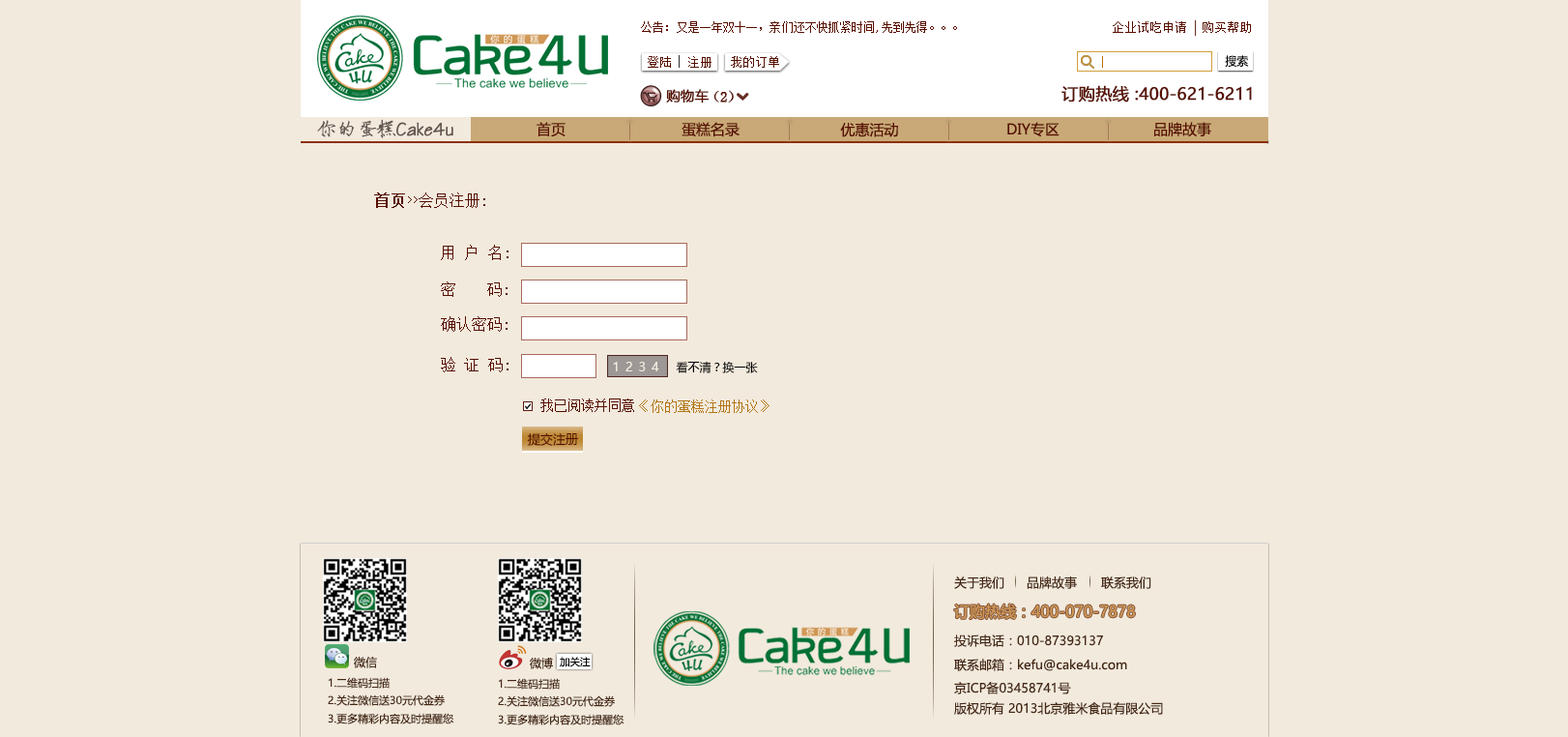
<style>
.page{position:relative;width:1568px;height:737px;background:#f2eadd}
.page>*{position:absolute;margin:0}
.t1{font:11.6px "SimSun";color:#570f00}
.t2{font:11.6px "SimSun";letter-spacing:0.01em;color:#570f00;scale:1.03 1}
.t3{font:12.6px "SimSun";color:#570f00;scale:1.03 1}
.t4{font:12.6px "SimSun";color:#570f00}
.t5{font:11.6px "MicrosoftYaHei";color:#000000}
.t6{font:13.5px "MicrosoftYaHei";color:#570f00;font-weight:bold;scale:1.03 1}
.t7{font:14.5px "NSimSun";color:#570f00;font-weight:bold;scale:1.03 1}
.t8{font:16.4px "MicrosoftYaHei";color:#570f00;font-weight:bold}
.t9{font:19.1px "JSouJingSu";color:#655651;font-weight:bold}
.t10{font:14.5px "MicrosoftYaHei";color:#570f00}
.t11{font:15.5px "NSimSun";color:#570f00}
.t12{font:15.5px "NSimSun";color:#570f00;font-weight:bold}
.t13{font:10.6px "NSimSun";color:#570f00}
.t14{font:15.5px "NSimSun";letter-spacing:0.53em;color:#570f00}
.t15{font:12.6px "MicrosoftYaHei";letter-spacing:0.45em;color:#f2eadd}
.t16{font:13.5px "NSimSun";color:#570f00}
.t17{font:13.5px "NSimSun";color:#b27617}
.t18{font:12.6px "MicrosoftYaHei";color:#570f00}
.t19{font:12.6px "MicrosoftYaHei";color:#462815}
.t20{font:15.5px "MicrosoftYaHei";color:#d09958}
.t21{font:11.6px "MicrosoftYaHei";color:#462815}
.t22{font:10.2px "MicrosoftYaHei";color:#000000}
.t23{font:10.6px "MicrosoftYaHei";color:#462815}
</style>
<div class="page">
<p class="t1" style="left:641px;top:21px;width:27px;height:12px">公告：</p>
<p class="t2" style="left:677px;top:21px;width:280px;height:12px">又是一年双十一，亲们还不快抓紧时间,先到先得。。。</p>
<p class="t3" style="left:1113px;top:21px;width:73px;height:12px">企业试吃申请</p>
<p class="t3" style="left:1203px;top:21px;width:48px;height:12px">购买帮助</p>
<p class="t4" style="left:648px;top:56px;width:23px;height:12px">登陆</p>
<p class="t4" style="left:688px;top:56px;width:23px;height:12px">注册</p>
<p class="t4" style="left:731px;top:56px;width:48px;height:12px">我的订单</p>
<p class="t5" style="left:1225px;top:55px;width:24px;height:12px">搜索</p>
<p class="t6" style="left:666px;top:89px;width:68px;height:14px">购物车<span class="t7">（2）</span></p>
<p class="t8" style="left:1061px;top:85px;width:191px;height:17px">订购热线 :400-621-6211</p>
<p class="t9" style="left:317px;top:119px;width:136px;height:19px">你的蛋糕Cake4u</p>
<p class="t10" style="left:537px;top:122px;width:29px;height:15px">首页</p>
<p class="t10" style="left:682px;top:122px;width:58px;height:15px">蛋糕名录</p>
<p class="t10" style="left:840px;top:122px;width:58px;height:15px">优惠活动</p>
<p class="t10" style="left:1007px;top:122px;width:53px;height:15px">DIY专区</p>
<p class="t10" style="left:1154px;top:122px;width:57px;height:15px">品牌故事</p>
<p class="t11" style="left:374px;top:192px;width:111px;height:16px"><span class="t12">首页</span><span class="t13">&gt;&gt;</span>会员注册:</p>
<p class="t14" style="left:441px;top:245px;width:67px;height:15px">用户<span class="t11">名:</span></p>
<p class="t11" style="left:441px;top:281px;width:67px;height:16px">密    码:</p>
<p class="t11" style="left:441px;top:316px;width:67px;height:16px">确认密码:</p>
<p class="t14" style="left:441px;top:357px;width:67px;height:15px">验证<span class="t11">码:</span></p>
<p class="t15" style="left:613px;top:362px;width:46px;height:9px">1234</p>
<p class="t5" style="left:676px;top:361px;width:82px;height:12px">看不清？换一张</p>
<p class="t16" style="left:540px;top:398px;width:94px;height:14px">我已阅读并同意</p>
<p class="t17" style="left:639px;top:399px;width:130px;height:14px">《你的蛋糕注册协议》</p>
<p class="t18" style="left:527px;top:433px;width:51px;height:13px">提交注册</p>
<p class="t19" style="left:954px;top:576px;width:50px;height:13px">关于我们</p>
<p class="t19" style="left:1027px;top:576px;width:50px;height:13px">品牌故事</p>
<p class="t19" style="left:1101px;top:576px;width:50px;height:13px">联系我们</p>
<p class="t20" style="left:954px;top:603px;width:181px;height:17px">订购热线：400-070-7878</p>
<p class="t19" style="left:954px;top:634px;width:149px;height:13px">投诉电话：010-87393137</p>
<p class="t21" style="left:354px;top:656px;width:23px;height:12px">微信</p>
<p class="t21" style="left:530px;top:657px;width:23px;height:12px">微博</p>
<p class="t22" style="left:560px;top:656px;width:31px;height:11px">加关注</p>
<p class="t19" style="left:954px;top:658px;width:173px;height:13px">联系邮箱：kefu@cake4u.com</p>
<p class="t23" style="left:329px;top:677px;width:61px;height:11px">1.二维码扫描</p>
<p class="t23" style="left:499px;top:678px;width:61px;height:11px">1.二维码扫描</p>
<p class="t19" style="left:954px;top:682px;width:117px;height:12px">京ICP备03458741号</p>
<p class="t23" style="left:328px;top:694px;width:117px;height:12px">2.关注微信送30元代金券</p>
<p class="t23" style="left:498px;top:695px;width:117px;height:12px">2.关注微信送30元代金券</p>
<p class="t19" style="left:954px;top:702px;width:209px;height:12px">版权所有 2013北京雅米食品有限公司</p>
<p class="t23" style="left:328px;top:712px;width:126px;height:12px">3.更多精彩内容及时提醒您</p>
<p class="t23" style="left:498px;top:713px;width:126px;height:12px">3.更多精彩内容及时提醒您</p>
</div>
